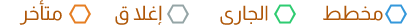
<style>
.page{position:relative;width:410px;height:25px;background:#ffffff}
.page>*{position:absolute;margin:0}
.t1{font:20px "Almarai-Regular";color:#af5708}
</style>
<div class="page">
<p class="t1" style="left:19px;top:0px;width:43px;height:25px">متأخر</p>
<p class="t1" style="left:115px;top:5px;width:47px;height:22px">إغلا ق</p>
<p class="t1" style="left:323px;top:5px;width:60px;height:16px">مخطط</p>
</div>
